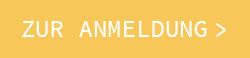
<style>
.page{position:relative;width:250px;height:58px;background:#f8c759}
.page>*{position:absolute;margin:0}
.t1{font:24px "SourceCodePro-Regular";color:#ffffff;text-transform:uppercase}
.t2{font:24px "SourceCodePro-Regular";letter-spacing:0.26em;color:#ffffff;text-transform:uppercase}
.t3{font:24px "SourceCodePro-Regular";letter-spacing:0.26em;color:#ffffff}
</style>
<div class="page">
<p class="t1" style="left:22px;top:21px;width:204px;height:16px">Zur Anmeldun<span class="t2">g</span><span class="t3">&gt;</span></p>
</div>
